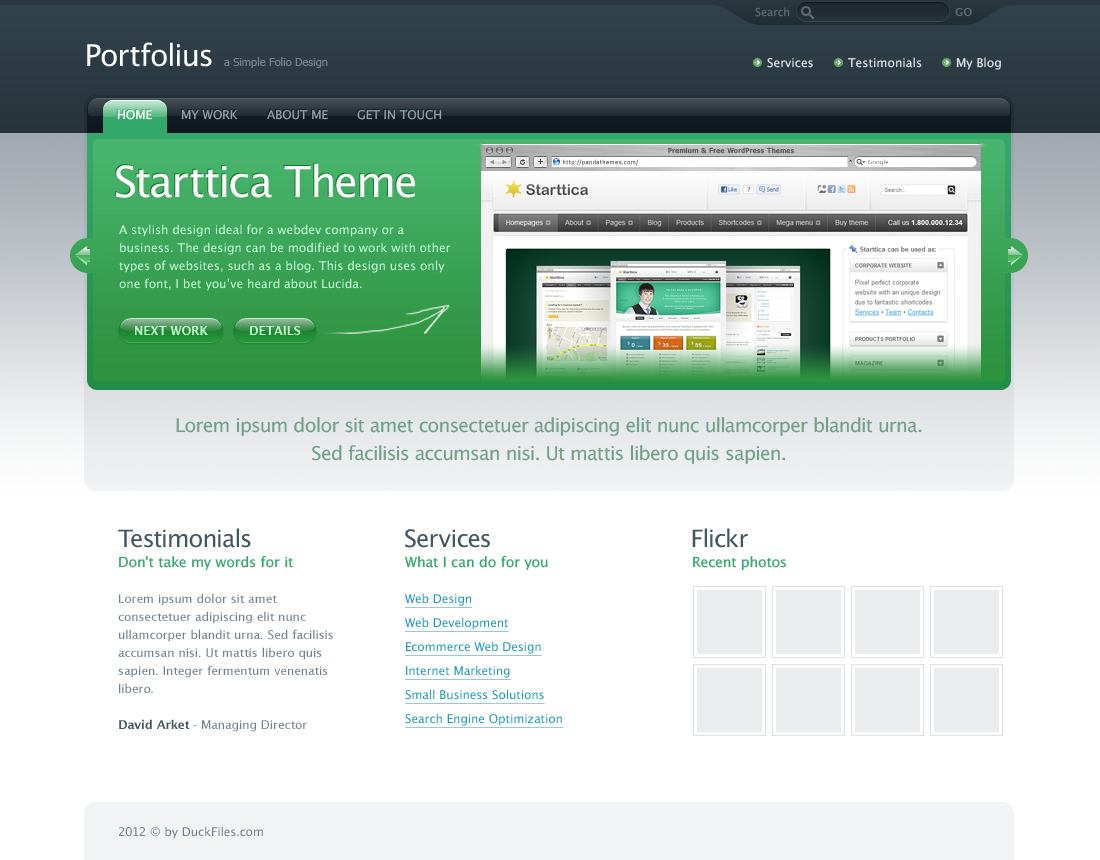
<style>
.page{position:relative;width:1100px;height:860px;background:#ffffff}
.page>*{position:absolute;margin:0}
.t1{font:11px "LucidaSans";color:#5e6a72}
.t2{font:11px "LucidaSans-Demi";color:#5e6b72}
.t3{font:30px "LucidaSans";letter-spacing:-0.025em;color:#ffffff}
.t4{font:11px "Tahoma";color:#76838b}
.t5{font:12px "LucidaSans";color:#e0e5e8}
.t6{font:12px "LucidaSans";color:#ffffff;text-transform:uppercase}
.t7{font:12px "LucidaSans";color:#96a2a9;text-transform:uppercase}
.t8{font:7px "Tahoma";letter-spacing:0.075em}
.t9{font:6px "Tahoma";letter-spacing:0.075em}
.t10{font:43px "LucidaSans";letter-spacing:-0.025em}
.t11{font:43px "LucidaSans";letter-spacing:-0.025em;color:#ffffff}
.t12{font:12px/18px "LucidaSans";color:#caffde}
.t13{font:12px "LucidaSans-Demi";color:#c2ffce;text-transform:uppercase}
.t14{font:19px/28px "LucidaSans";letter-spacing:-0.025em;color:#72a089}
.t15{font:24px "LucidaSans";letter-spacing:-0.025em;color:#445662}
.t16{font:14px "LucidaSans";color:#34a86b}
.t17{font:12px/18px "LucidaSans";color:#73838e}
.t18{font:12px/18px "LucidaSans-Demi";color:#445662}
.t19{font:12px/24px "LucidaSans";color:#1f9bb5;text-decoration:underline}
.t20{font:12px "LucidaSans";color:#73838e}
</style>
<div class="page">
<p class="t1" style="left:755px;top:7px;width:35px;height:10px">Search</p>
<p class="t2" style="left:955px;top:8px;width:17px;height:8px">GO</p>
<p class="t3" style="left:87px;top:42px;width:125px;height:25px">Portfolius</p>
<p class="t4" style="left:224px;top:57px;width:104px;height:11px">a Simple Folio Design</p>
<p class="t5" style="left:767px;top:57px;width:46px;height:11px">Services</p>
<p class="t5" style="left:847px;top:57px;width:75px;height:11px">Testimonials</p>
<p class="t5" style="left:956px;top:57px;width:45px;height:13px">My Blog</p>
<p class="t6" style="left:117px;top:109px;width:35px;height:11px">Home</p>
<p class="t7" style="left:181px;top:109px;width:57px;height:11px">My Work</p>
<p class="t7" style="left:267px;top:109px;width:61px;height:11px">About me</p>
<p class="t7" style="left:357px;top:109px;width:85px;height:11px">get in Touch</p>
<p class="t8" style="left:668px;top:147px;width:126px;height:7px">Premium &amp; Free WordPress Themes</p>
<p class="t9" style="left:563px;top:159px;width:76px;height:7px">http://pandathemes.com/</p>
<p class="t10" style="left:115px;top:162px;width:299px;height:35px">Starttica Theme</p>
<p class="t11" style="left:116px;top:163px;width:299px;height:35px">Starttica Theme</p>
<p class="t12" style="left:119px;top:224px;width:332px;height:67px">A stylish design ideal for a webdev company or a business. The design can be modified to work with other types of websites, such as a blog. This design uses only one font, I bet you’ve heard about Lucida.</p>
<p class="t13" style="left:135px;top:326px;width:73px;height:9px">next work</p>
<p class="t13" style="left:250px;top:326px;width:51px;height:9px">Details</p>
<p class="t14" style="left:176px;top:417px;width:746px;height:47px;text-align:center">Lorem ipsum dolor sit amet consectetuer adipiscing elit nunc ullamcorper blandit urna. <br>Sed facilisis accumsan nisi. Ut mattis libero quis sapien.</p>
<p class="t15" style="left:118px;top:528px;width:133px;height:20px">Testimonials</p>
<p class="t15" style="left:405px;top:529px;width:85px;height:19px">Services</p>
<p class="t15" style="left:692px;top:528px;width:56px;height:20px">Flickr</p>
<p class="t16" style="left:119px;top:555px;width:174px;height:15px">Don't take my words for it</p>
<p class="t16" style="left:405px;top:555px;width:143px;height:15px">What I can do for you</p>
<p class="t16" style="left:693px;top:556px;width:93px;height:14px">Recent photos</p>
<p class="t17" style="left:118px;top:593px;width:215px;height:139px">Lorem ipsum dolor sit amet consectetuer adipiscing elit nunc ullamcorper blandit urna. Sed facilisis accumsan nisi. Ut mattis libero quis sapien. Integer fermentum venenatis libero.<br><br><span class="t18">David Arket</span> - Managing Director</p>
<p class="t19" style="left:405px;top:593px;width:159px;height:135px">Web Design<br>Web Development<br>Ecommerce Web Design<br>Internet Marketing<br>Small Business Solutions<br>Search Engine Optimization</p>
<p class="t20" style="left:119px;top:826px;width:144px;height:13px">2012 © by DuckFiles.com</p>
</div>
